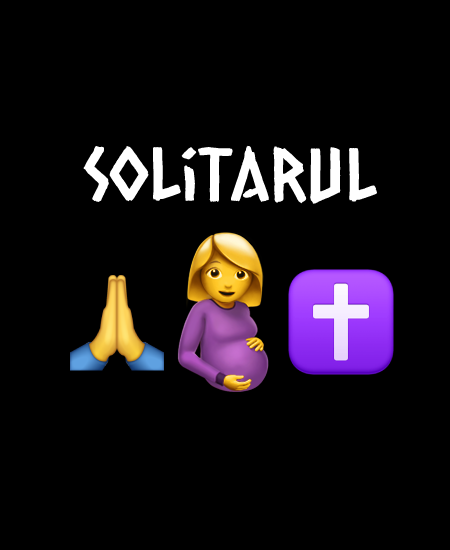
<style>
.page{position:relative;width:450px;height:550px;background:#000000}
.page>*{position:absolute;margin:0}
.t1{font:73px "CaesarDressing";color:#ffffff}
</style>
<div class="page">
<p class="t1" style="left:83px;top:145px;width:294px;height:59px">Solitarul</p>
</div>
